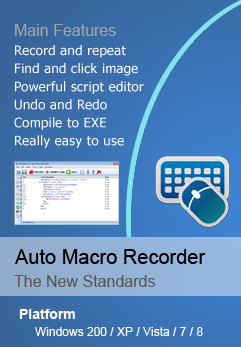
<style>
.page{position:relative;width:241px;height:347px}
.page>*{position:absolute;margin:0}
.t1{font:16px "ArialMT";color:#a4a4a4}
.t2{font:13px/18.1px "Tahoma";letter-spacing:0.03em;color:#fdfdfd}
.t3{font:20px "ArialMT";color:#000000}
.t4{font:16px "ArialMT";color:#585858}
.t5{font:14px "Arial-BoldMT";color:#ffffff}
.t6{font:12px "ArialMT";color:#ffffff}
</style>
<div class="page">
<p class="t1" style="left:15px;top:24px;width:101px;height:12px">Main Features</p>
<p class="t2" style="left:14px;top:45px;width:130px;height:103px">Record and repeat<br>Find and click image<br>Powerful script editor<br>Undo and Redo<br>Compile to EXE<br>Really easy to use</p>
<p class="t3" style="left:15px;top:249px;width:191px;height:15px">Auto Macro Recorder</p>
<p class="t4" style="left:14px;top:275px;width:141px;height:12px">The New Standards</p>
<p class="t5" style="left:19px;top:309px;width:56px;height:10px">Platform</p>
<p class="t6" style="left:35px;top:327px;width:168px;height:9px">Windows 200 / XP / Vista / 7 / 8</p>
</div>
